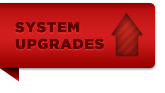
<style>
.page{position:relative;width:165px;height:93px;background:#ffffff}
.page>*{position:absolute;margin:0}
.t1{font:14px "GothamBlack";letter-spacing:0.05em;color:#600000;text-transform:uppercase;font-weight:bold}
</style>
<div class="page">
<p class="t1" style="left:15px;top:22px;width:89px;height:28px">System<br>Upgrades</p>
</div>
